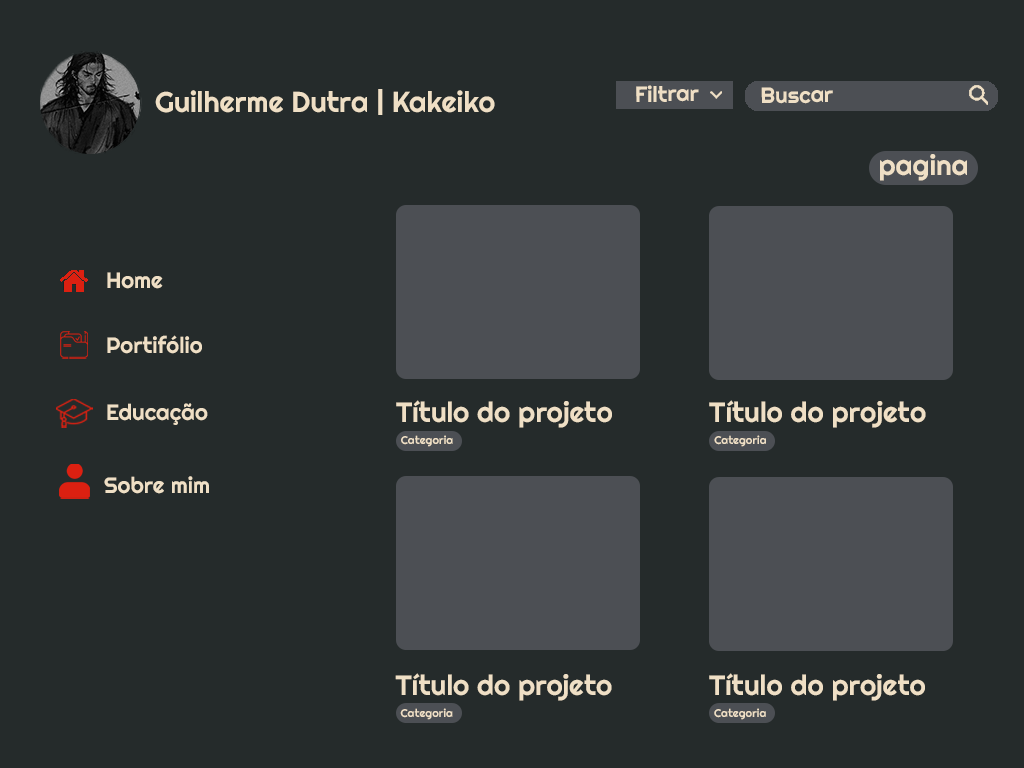
<style>
.page{position:relative;width:1024px;height:768px;background:#252b2b}
.page>*{position:absolute;margin:0}
.t1{font:28.7px "Righteous-Regular";color:#efdfc5}
.t2{font:22.1px "Righteous-Regular";color:#efdfc5}
.t3{font:28px "Righteous-Regular";color:#efdfc5}
.t4{font:22.3px "Righteous-Regular";color:#efdfc5}
.t5{font:11.3px "Righteous-Regular";color:#efdfc5}
</style>
<div class="page">
<p class="t1" style="left:155px;top:89px;width:340px;height:26px">Guilherme Dutra | Kakeiko</p>
<p class="t2" style="left:636px;top:85px;width:63px;height:17px;rotate:-1deg">Filtrar</p>
<p class="t2" style="left:761px;top:87px;width:72px;height:17px;rotate:-1deg">Buscar</p>
<p class="t3" style="left:880px;top:154px;width:87px;height:27px">pagina</p>
<p class="t4" style="left:107px;top:272px;width:56px;height:17px">Home</p>
<p class="t4" style="left:107px;top:335px;width:95px;height:19px">Portifólio</p>
<p class="t3" style="left:396px;top:400px;width:216px;height:28px">Título do projeto</p>
<p class="t3" style="left:709px;top:400px;width:217px;height:28px">Título do projeto</p>
<p class="t4" style="left:107px;top:403px;width:101px;height:22px">Educação</p>
<p class="t5" style="left:401px;top:435px;width:52px;height:12px">Categoria</p>
<p class="t5" style="left:714px;top:435px;width:52px;height:12px">Categoria</p>
<p class="t4" style="left:104px;top:476px;width:105px;height:18px">Sobre mim</p>
<p class="t3" style="left:395px;top:673px;width:217px;height:28px">Título do projeto</p>
<p class="t3" style="left:709px;top:673px;width:216px;height:28px">Título do projeto</p>
<p class="t5" style="left:400px;top:708px;width:53px;height:12px">Categoria</p>
<p class="t5" style="left:714px;top:708px;width:52px;height:12px">Categoria</p>
</div>
